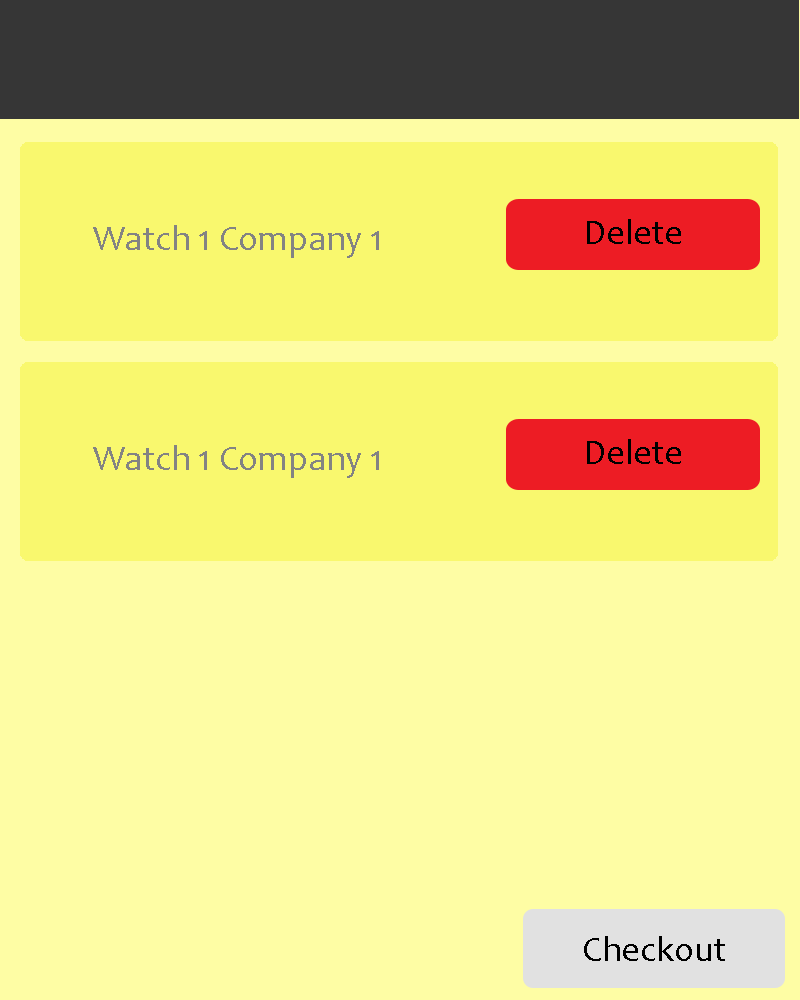
<style>
.page{position:relative;width:800px;height:1000px;background:#fefda4}
.page>*{position:absolute;margin:0}
.t1{font:36px "Candara";color:#000000}
.t2{font:36px "Candara";color:#838383}
</style>
<div class="page">
<p class="t1" style="left:587px;top:219px;width:94px;height:25px">Delete</p>
<p class="t2" style="left:93px;top:225px;width:286px;height:33px">Watch 1 Company 1</p>
<p class="t2" style="left:93px;top:445px;width:286px;height:33px">Watch 1 Company 1</p>
<p class="t1" style="left:587px;top:439px;width:94px;height:25px">Delete</p>
<p class="t1" style="left:584px;top:936px;width:141px;height:25px">Checkout</p>
</div>
